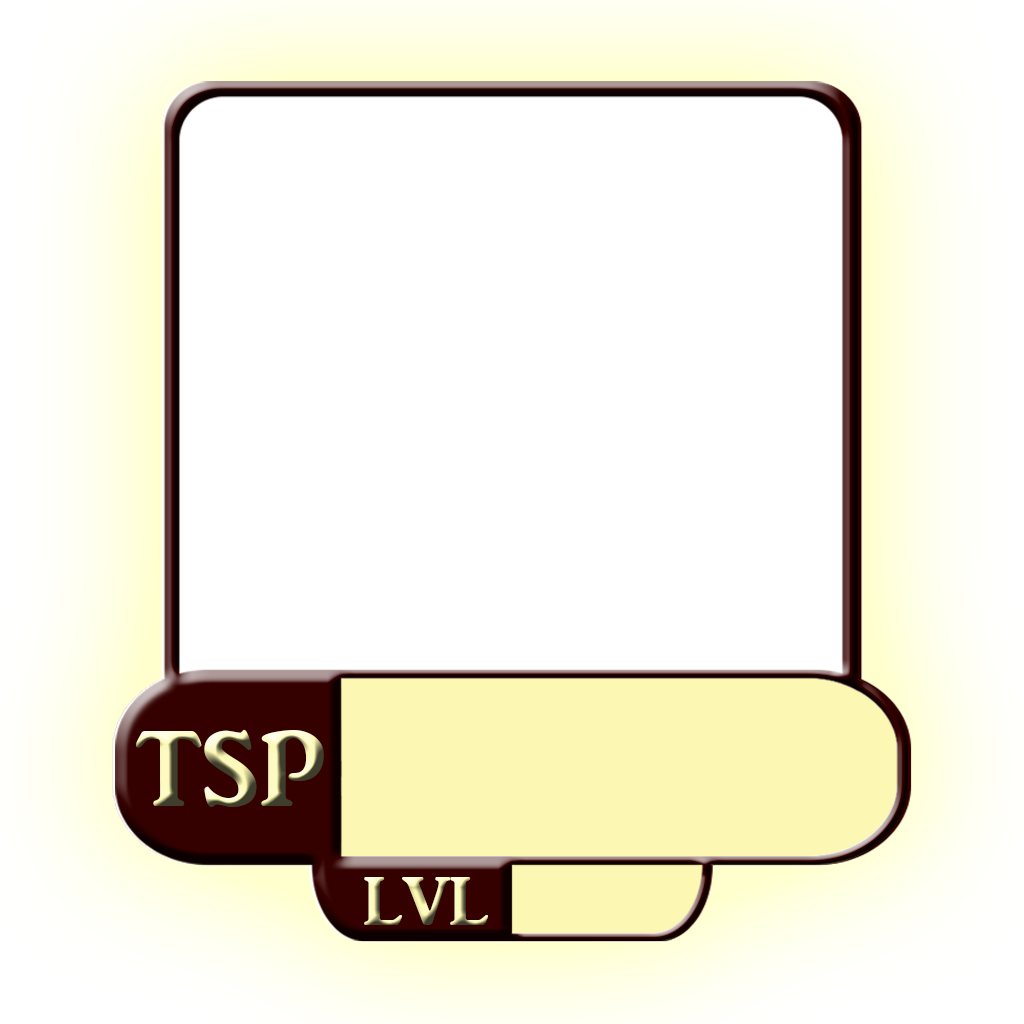
<style>
.page{position:relative;width:1024px;height:1024px;background:#ffffff}
.page>*{position:absolute;margin:0}
.t1{font:139.1px "ARJULIAN"}
.t2{font:70.6px "ARJULIAN"}
</style>
<div class="page">
<p class="t1" style="left:136px;top:729px;width:188px;height:78px">tsp</p>
<p class="t2" style="left:364px;top:877px;width:124px;height:48px">LVL</p>
</div>
